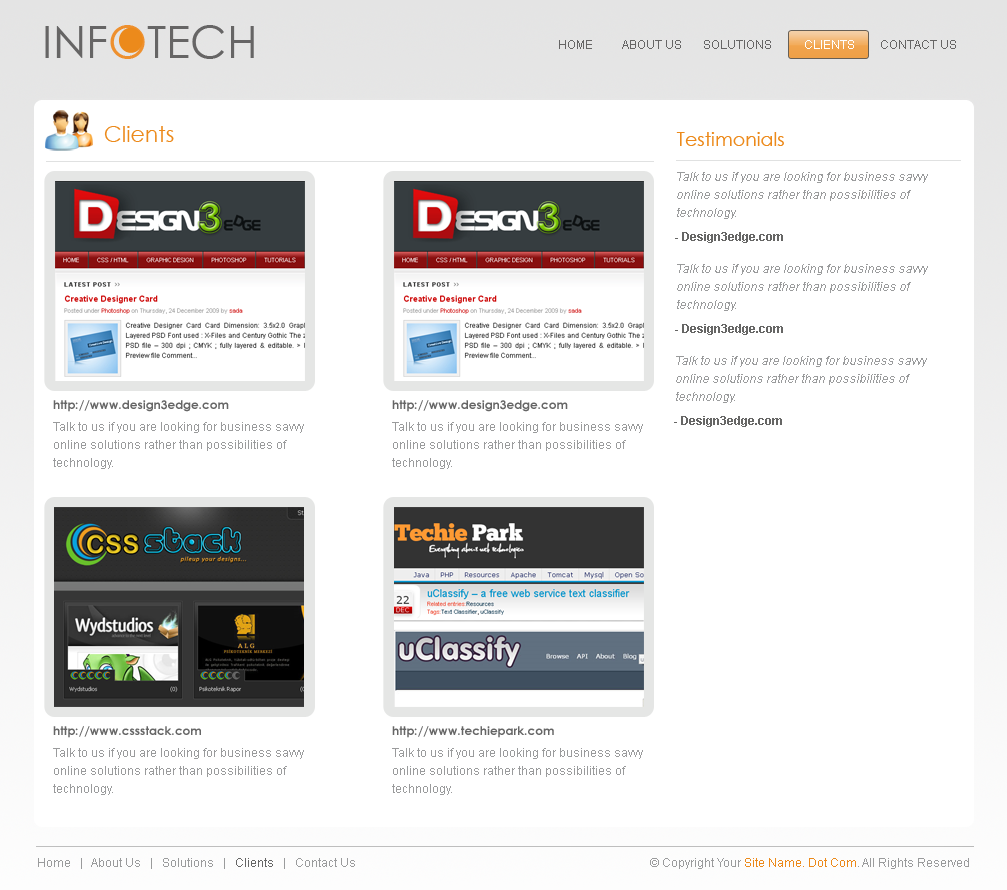
<style>
.page{position:relative;width:1007px;height:890px;background:#ffffff}
.page>*{position:absolute;margin:0}
.t1{font:45.1px "CenturyGothic";color:#666565}
.t2{font:45.1px "CenturyGothic";color:#ee902e}
.t3{font:12px "ArialMT";color:#666565}
.t4{font:12px "ArialMT";color:#ffffff}
.t5{font:22px "CenturyGothic";color:#ec8a1b}
.t6{font:19px "CenturyGothic";color:#ec8a1b}
.t7{font:12px/18px "ArialMT";color:#9a9b9c;font-style:italic}
.t8{font:12px "Arial-BoldMT";color:#666665}
.t9{font:12px "CenturyGothic-Bold";color:#666666}
.t10{font:12px/18px "ArialMT";color:#9a9b9c}
.t11{font:12px "ArialMT";color:#9a9b9c}
.t12{font:12px "ArialMT";color:#666666}
.t13{font:12px "ArialMT";color:#ec8a1b}
</style>
<div class="page">
<p class="t1" style="left:45px;top:25px;width:209px;height:34px">INF<span class="t2">O</span>TECH</p>
<p class="t3" style="left:559px;top:40px;width:33px;height:9px">HOME</p>
<p class="t3" style="left:622px;top:40px;width:59px;height:9px">ABOUT US</p>
<p class="t3" style="left:704px;top:40px;width:67px;height:9px">SOLUTIONS</p>
<p class="t4" style="left:805px;top:40px;width:49px;height:9px">CLIENTS</p>
<p class="t3" style="left:881px;top:40px;width:75px;height:9px">CONTACT US</p>
<p class="t5" style="left:104px;top:126px;width:70px;height:16px">Clients</p>
<p class="t6" style="left:676px;top:132px;width:108px;height:14px">Testimonials</p>
<p class="t7" style="left:677px;top:172px;width:251px;height:47px">Talk to us if you are looking for business savvy <br>online solutions rather than possibilities of <br>technology.</p>
<p class="t8" style="left:675px;top:232px;width:108px;height:11px">- Design3edge.com</p>
<p class="t7" style="left:677px;top:264px;width:251px;height:47px">Talk to us if you are looking for business savvy <br>online solutions rather than possibilities of <br>technology.</p>
<p class="t8" style="left:675px;top:324px;width:108px;height:11px">- Design3edge.com</p>
<p class="t7" style="left:676px;top:356px;width:251px;height:47px">Talk to us if you are looking for business savvy <br>online solutions rather than possibilities of <br>technology.</p>
<p class="t9" style="left:53px;top:400px;width:176px;height:12px">http://www.design3edge.com</p>
<p class="t9" style="left:392px;top:400px;width:176px;height:12px">http://www.design3edge.com</p>
<p class="t10" style="left:53px;top:422px;width:251px;height:47px">Talk to us if you are looking for business savvy <br>online solutions rather than possibilities of <br>technology.</p>
<p class="t10" style="left:392px;top:422px;width:251px;height:47px">Talk to us if you are looking for business savvy <br>online solutions rather than possibilities of <br>technology.</p>
<p class="t8" style="left:674px;top:416px;width:108px;height:11px">- Design3edge.com</p>
<p class="t9" style="left:53px;top:726px;width:148px;height:12px">http://www.cssstack.com</p>
<p class="t9" style="left:392px;top:726px;width:162px;height:12px">http://www.techiepark.com</p>
<p class="t10" style="left:53px;top:748px;width:251px;height:47px">Talk to us if you are looking for business savvy <br>online solutions rather than possibilities of <br>technology.</p>
<p class="t10" style="left:392px;top:748px;width:251px;height:47px">Talk to us if you are looking for business savvy <br>online solutions rather than possibilities of <br>technology.</p>
<p class="t11" style="left:38px;top:858px;width:317px;height:11px">Home   |   About Us   |   Solutions   |   <span class="t12">Clients</span>   |   Contact Us</p>
<p class="t11" style="left:650px;top:858px;width:319px;height:11px">© Copyright Your <span class="t13">Site Name. Dot Com</span>. All Rights Reserved</p>
</div>
